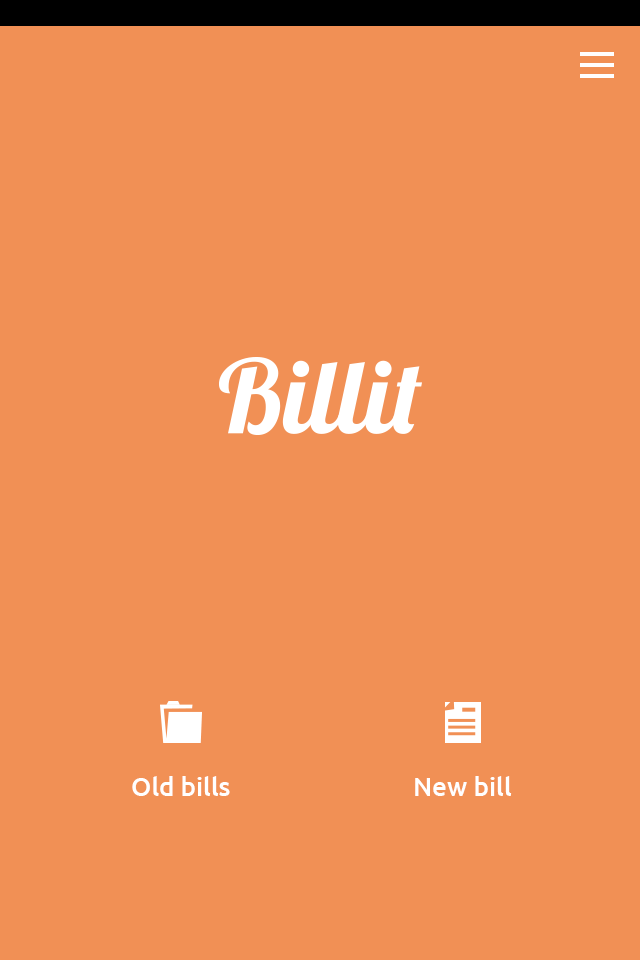
<style>
.page{position:relative;width:640px;height:960px;background:#f19055}
.page>*{position:absolute;margin:0}
.t1{font:26px "Ubuntu-Medium";color:#ffffff}
</style>
<div class="page">
<p class="t1" style="left:132px;top:776px;width:98px;height:20px">Old bills</p>
<p class="t1" style="left:415px;top:776px;width:97px;height:20px">New bill</p>
</div>
